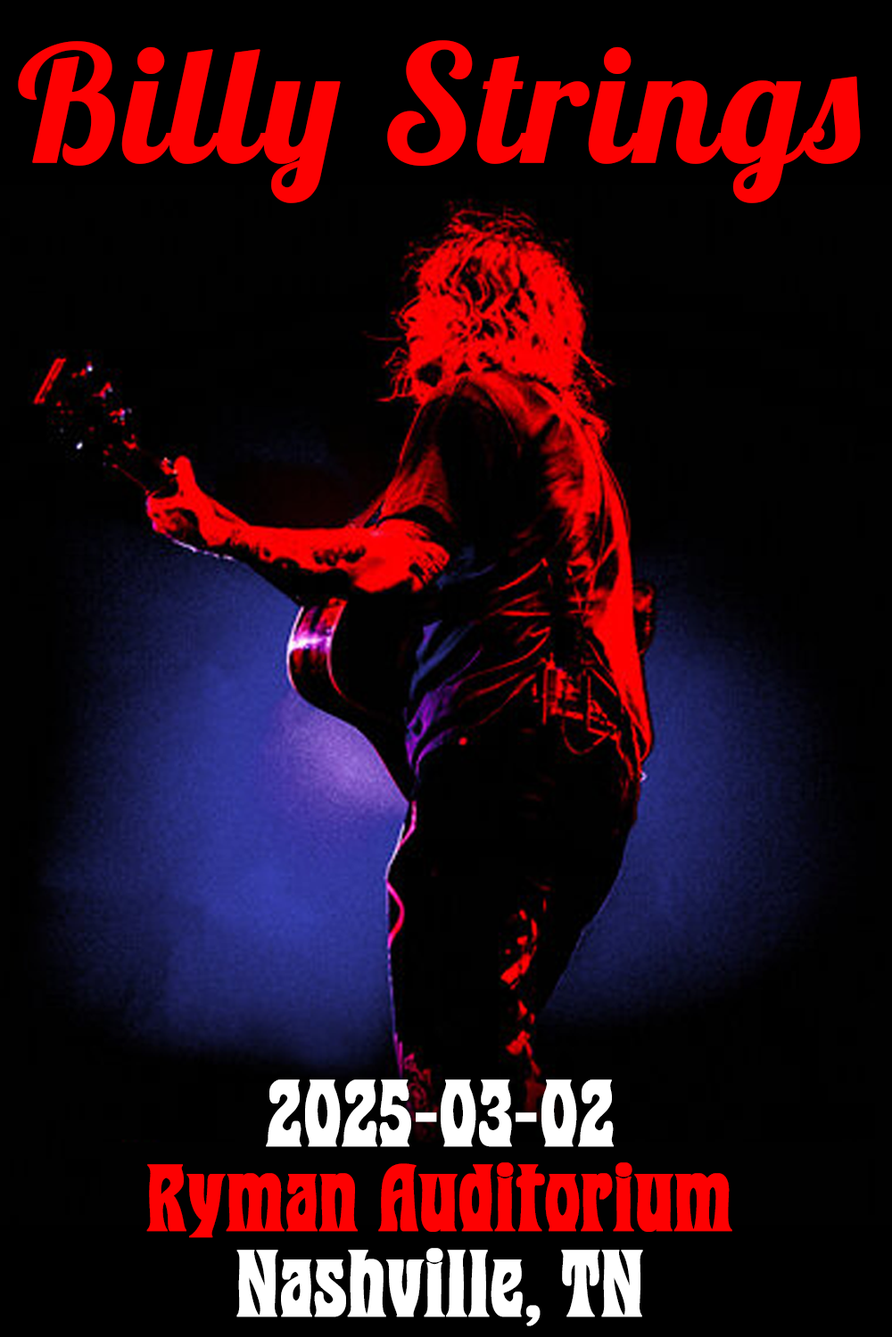
<style>
.page{position:relative;width:892px;height:1337px;background:#010101}
.page>*{position:absolute;margin:0}
.t1{font:160.5px "Lobster-Regular";color:#fd0102;font-weight:bold}
.t2{font:80.2px "PurePsychedelia-Bold";color:#ffffff;font-weight:bold}
.t3{font:80.2px "PurePsychedelia-Bold";color:#fd0102;font-weight:bold}
</style>
<div class="page">
<p class="t1" style="left:18px;top:40px;width:842px;height:163px">Billy Strings</p>
<p class="t2" style="left:266px;top:1080px;width:347px;height:67px">2025-03-02</p>
<p class="t3" style="left:146px;top:1163px;width:586px;height:75px">Ryman Auditorium</p>
<p class="t2" style="left:236px;top:1248px;width:407px;height:79px">Nashville, TN</p>
</div>
